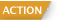
<style>
.page{position:relative;width:57px;height:20px;background:#e09c2a}
.page>*{position:absolute;margin:0}
.t1{font:10px "LucidaGrande-Bold";letter-spacing:-0.02em;color:#ffffff;text-transform:uppercase}
</style>
<div class="page">
<p class="t1" style="left:2px;top:6px;width:40px;height:8px">action</p>
</div>
